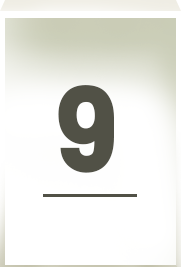
<style>
.page{position:relative;width:181px;height:267px;background:#ffffff}
.page>*{position:absolute;margin:0}
.t1{font:102px "KoreanBTM-R";letter-spacing:0.01em;color:#515146}
</style>
<div class="page">
<p class="t1" style="left:58px;top:85px;width:56px;height:88px">9</p>
</div>
